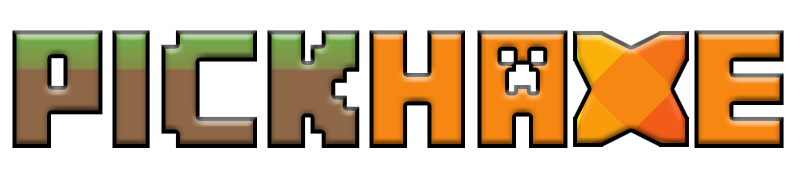
<style>
.page{position:relative;width:800px;height:180px;background:#ffffff}
.page>*{position:absolute;margin:0}
.t1{font:150px "Minecrafter"}
</style>
<div class="page">
<p class="t1" style="left:12px;top:30px;width:348px;height:118px">PiCK</p>
<p class="t1" style="left:369px;top:30px;width:199px;height:118px">ha</p>
<p class="t1" style="left:694px;top:30px;width:90px;height:118px">E</p>
</div>
